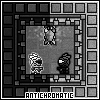
<style>
.page{position:relative;width:100px;height:100px;background:#000000}
.page>*{position:absolute;margin:0}
.t1{font:8px "04b24";color:#000000}
</style>
<div class="page">
<p class="t1" style="left:26px;top:93px;width:47px;height:5px">ANTICHROMATIC</p>
</div>
